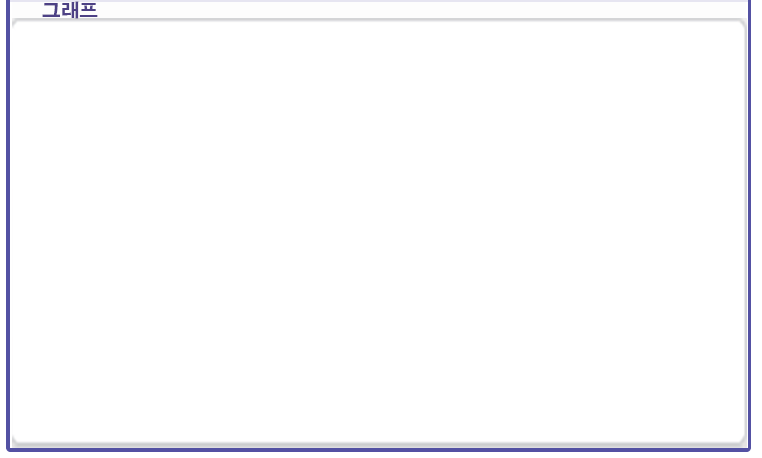
<style>
.page{position:relative;width:762px;height:458px;background:#ffffff}
.page>*{position:absolute;margin:0}
.t1{font:18.7px "H2gtrE";color:#4d4185}
</style>
<div class="page">
<p class="t1" style="left:42px;top:1px;width:56px;height:18px">그래프</p>
</div>
